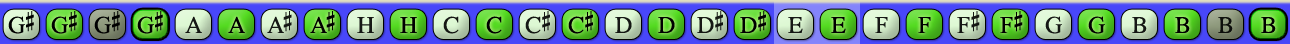
<style>
.page{position:relative;width:1290px;height:44px}
.page>*{position:absolute;margin:0}
.t1{font:24px "OpusChords";letter-spacing:-0.025em;color:#000000}
.t2{font:24px "OpusChords";color:#000000}
.t3{font:24px "OpusChords";letter-spacing:-0.1em;color:#000000}
</style>
<div class="page">
<p class="t1" style="left:8px;top:11px;width:26px;height:23px">G#</p>
<p class="t1" style="left:51px;top:11px;width:26px;height:23px">G#</p>
<p class="t1" style="left:94px;top:11px;width:26px;height:23px">G#</p>
<p class="t1" style="left:137px;top:11px;width:26px;height:23px">G#</p>
<p class="t2" style="left:185px;top:16px;width:17px;height:17px;opacity:0.9">A</p>
<p class="t2" style="left:228px;top:16px;width:17px;height:17px">A</p>
<p class="t3" style="left:267px;top:11px;width:25px;height:22px;opacity:0.9">A#</p>
<p class="t3" style="left:310px;top:11px;width:25px;height:22px">A#</p>
<p class="t2" style="left:357px;top:17px;width:17px;height:16px;opacity:0.9">H</p>
<p class="t2" style="left:400px;top:17px;width:17px;height:16px">H</p>
<p class="t2" style="left:443px;top:16px;width:16px;height:18px;opacity:0.9">C</p>
<p class="t2" style="left:486px;top:16px;width:16px;height:18px">C</p>
<p class="t2" style="left:525px;top:11px;width:25px;height:23px;opacity:0.9">C#</p>
<p class="t2" style="left:568px;top:11px;width:25px;height:23px">C#</p>
<p class="t2" style="left:615px;top:17px;width:17px;height:16px;opacity:0.9">D</p>
<p class="t2" style="left:658px;top:17px;width:17px;height:16px">D</p>
<p class="t1" style="left:697px;top:11px;width:26px;height:22px;opacity:0.9">D#</p>
<p class="t1" style="left:740px;top:11px;width:26px;height:22px">D#</p>
<p class="t2" style="left:788px;top:17px;width:15px;height:16px;opacity:0.9">E</p>
<p class="t2" style="left:831px;top:17px;width:15px;height:16px">E</p>
<p class="t2" style="left:875px;top:17px;width:13px;height:16px;opacity:0.9">F</p>
<p class="t2" style="left:918px;top:17px;width:13px;height:16px">F</p>
<p class="t2" style="left:957px;top:11px;width:23px;height:22px;opacity:0.9">F#</p>
<p class="t2" style="left:1000px;top:11px;width:23px;height:22px">F#</p>
<p class="t2" style="left:1045px;top:16px;width:17px;height:18px;opacity:0.9">G</p>
<p class="t2" style="left:1088px;top:16px;width:17px;height:18px">G</p>
<p class="t2" style="left:1132px;top:17px;width:15px;height:16px;opacity:0.9">B</p>
<p class="t2" style="left:1175px;top:17px;width:15px;height:16px">B</p>
<p class="t2" style="left:1218px;top:17px;width:15px;height:16px;opacity:0.9">B</p>
<p class="t2" style="left:1261px;top:17px;width:15px;height:16px">B</p>
</div>
